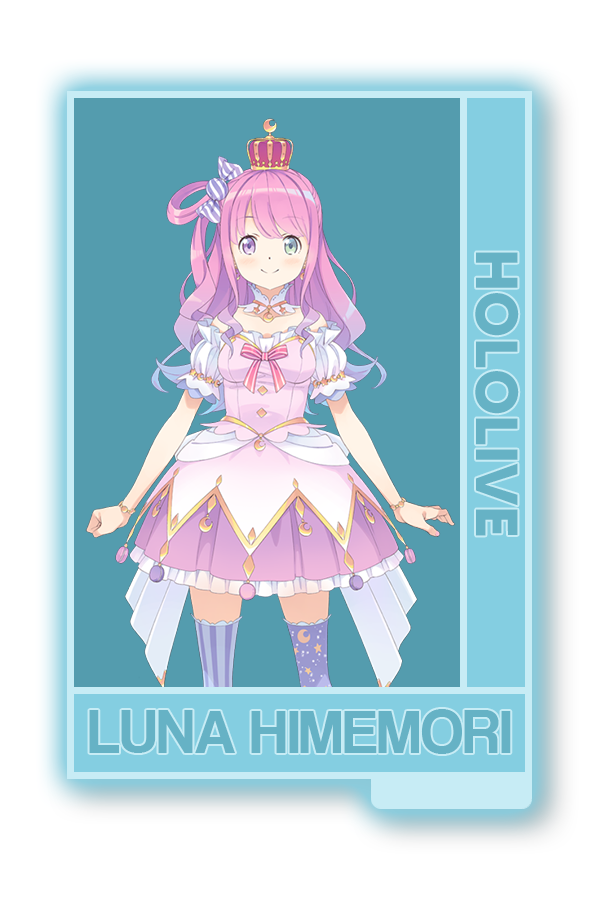
<style>
.page{position:relative;width:600px;height:900px;background:#549cae}
.page>*{position:absolute;margin:0}
.t1{font:59.2px "MADETOMMY-Bold";color:#66b2c5}
.t2{font:63.2px "CoolveticaRg-Regular";color:#66b2c5}
</style>
<div class="page">
<p class="t1" style="left:475px;top:252px;width:44px;height:284px;rotate:90deg">HOLOLIVE</p>
<p class="t2" style="left:89px;top:709px;width:422px;height:45px">LUNA HIMEMORI</p>
</div>
